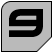
<style>
.page{position:relative;width:52px;height:52px;background:#bababa}
.page>*{position:absolute;margin:0}
.t1{font:36px "Xirod-Regular";color:#000000}
</style>
<div class="page">
<p class="t1" style="left:9px;top:9px;width:34px;height:28px">9</p>
</div>
